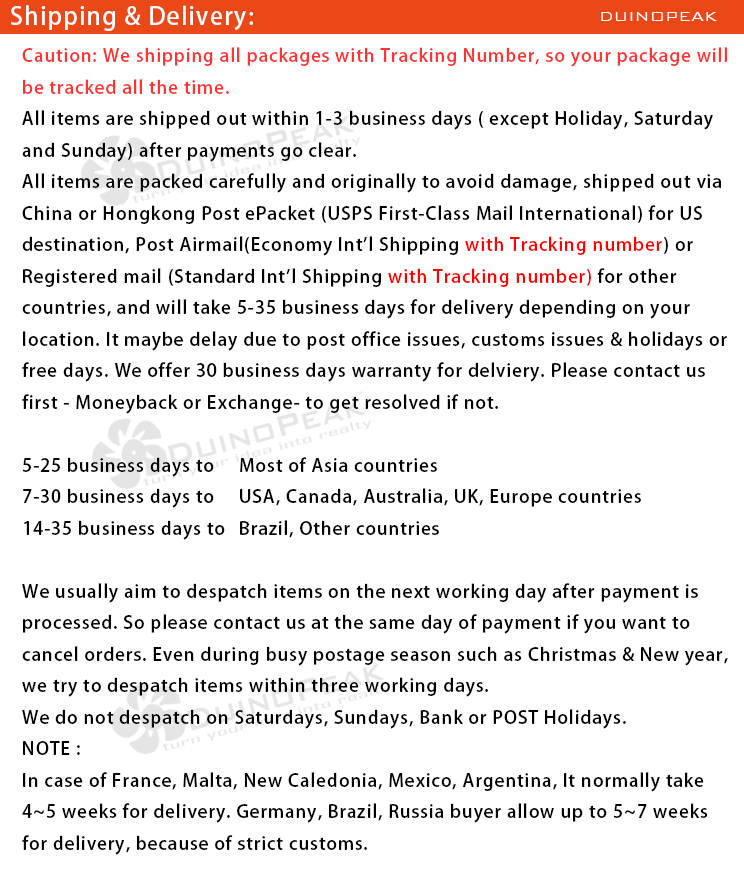
<style>
.page{position:relative;width:744px;height:878px;background:#ffffff}
.page>*{position:absolute;margin:0}
.t1{font:24px "AdobeHeitiStd-Regular";letter-spacing:0.05em;color:#ffffff}
.t2{font:18px "BankGothicBT-Light";color:#ffffff}
.t3{font:18px "AdobeHeitiStd-Regular";letter-spacing:0.05em;color:#000000}
.t4{font:18px "AdobeHeitiStd-Regular";letter-spacing:0.05em;color:#ff3333}
.t5{font:18px "AdobeHeitiStd-Regular";letter-spacing:0.05em;color:#ff0000}
</style>
<div class="page">
<p class="t1" style="left:11px;top:5px;width:242px;height:26px">Shipping &amp; Delivery:</p>
<p class="t2" style="left:601px;top:12px;width:116px;height:9px">DUINOPEAK</p>
<p class="t3" style="left:22px;top:47px;width:706px;height:808px"><span class="t4">Caution: We shipping all packages with Tracking Number, so your package will<br>be tracked all the time.<br></span>All items are shipped out within 1-3 business days ( except Holiday, Saturday <br>and Sunday) after payments go clear.<br>All items are packed carefully and originally to avoid damage, shipped out via <br>China or Hongkong Post ePacket (USPS First-Class Mail International) for US <br>destination, Post Airmail(Economy Int'l Shipping <span class="t5">with Tracking number</span>) or <br>Registered mail (Standard Int'l Shipping <span class="t5">with Tracking number)</span> for other <br>countries, and will take 5-35 business days for delivery depending on your <br>location. It maybe delay due to post office issues, customs issues &amp; holidays or <br>free days. We offer 30 business days warranty for delviery. Please contact us <br>first - Moneyback or Exchange- to get resolved if not.<br><br>5-25 business days to Most of Asia countries<br>7-30 business days to USA, Canada, Australia, UK, Europe countries<br>14-35 business days to Brazil, Other countries<br><br>We usually aim to despatch items on the next working day after payment is <br>processed. So please contact us at the same day of payment if you want to <br>cancel orders. Even during busy postage season such as Christmas &amp; New year, <br>we try to despatch items within three working days.<br>We do not despatch on Saturdays, Sundays, Bank or POST Holidays.<br>NOTE :<br>In case of France, Malta, New Caledonia, Mexico, Argentina, It normally take <br>4~5 weeks for delivery. Germany, Brazil, Russia buyer allow up to 5~7 weeks <br>for delivery, because of strict customs.</p>
</div>
